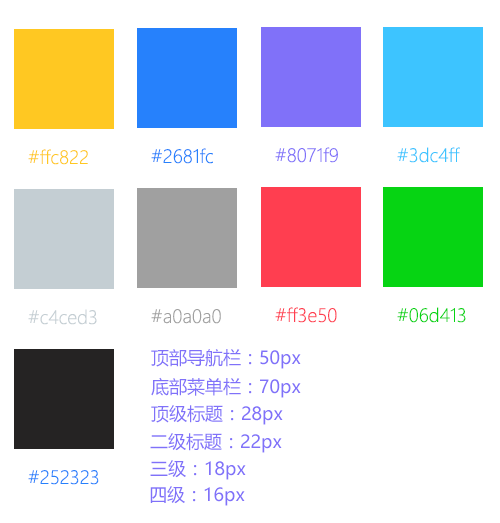
<style>
.page{position:relative;width:500px;height:523px;background:#ffffff}
.page>*{position:absolute;margin:0}
.t1{font:18px "MicrosoftYaHeiLight";color:#ffc822}
.t2{font:18px "MicrosoftYaHeiLight";color:#2681fc}
.t3{font:18px "MicrosoftYaHeiLight";color:#8071f9}
.t4{font:18px "MicrosoftYaHeiLight";color:#3dc4ff}
.t5{font:18px "MicrosoftYaHeiLight";color:#c4ced3}
.t6{font:18px "MicrosoftYaHeiLight";color:#a0a0a0}
.t7{font:18px "MicrosoftYaHeiLight";color:#ff3e50}
.t8{font:18px "MicrosoftYaHeiLight";color:#06d413}
.t9{font:18px "MicrosoftYaHei";color:#8071f9}
</style>
<div class="page">
<p class="t1" style="left:28px;top:149px;width:60px;height:16px">#ffc822</p>
<p class="t2" style="left:151px;top:148px;width:62px;height:16px">#2681fc</p>
<p class="t3" style="left:275px;top:147px;width:63px;height:16px">#8071f9</p>
<p class="t4" style="left:397px;top:147px;width:63px;height:16px">#3dc4ff</p>
<p class="t5" style="left:28px;top:309px;width:69px;height:16px">#c4ced3</p>
<p class="t6" style="left:151px;top:309px;width:70px;height:15px">#a0a0a0</p>
<p class="t7" style="left:275px;top:307px;width:62px;height:16px">#ff3e50</p>
<p class="t8" style="left:397px;top:307px;width:69px;height:16px">#06d413</p>
<p class="t9" style="left:151px;top:349px;width:150px;height:20px">顶部导航栏：50px</p>
<p class="t9" style="left:151px;top:377px;width:150px;height:21px">底部菜单栏：70px</p>
<p class="t9" style="left:151px;top:405px;width:132px;height:20px">顶级标题：28px</p>
<p class="t9" style="left:150px;top:433px;width:132px;height:20px">二级标题：22px</p>
<p class="t9" style="left:150px;top:460px;width:96px;height:20px">三级：18px</p>
<p class="t2" style="left:28px;top:470px;width:71px;height:15px">#252323</p>
<p class="t9" style="left:150px;top:486px;width:95px;height:20px">四级：16px</p>
</div>
